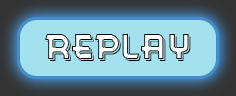
<style>
.page{position:relative;width:236px;height:96px;background:#a4e1ee}
.page>*{position:absolute;margin:0}
.t1{font:35px "CinemaGothicBTNShadow"}
</style>
<div class="page">
<p class="t1" style="left:45px;top:34px;width:146px;height:27px">REPLAY</p>
</div>
